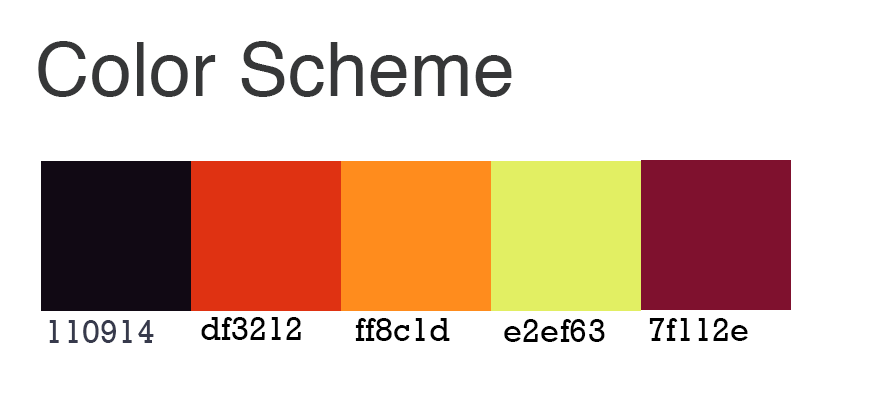
<style>
.page{position:relative;width:870px;height:403px;background:#ffffff}
.page>*{position:absolute;margin:0}
.t1{font:75px "Helvetica";letter-spacing:0.005em;color:#363738}
.t2{font:33.3px "Rockwell";letter-spacing:0.005em;color:#000000}
.t3{font:33.3px "Rockwell";letter-spacing:0.005em;color:#373a4c}
</style>
<div class="page">
<p class="t1" style="left:38px;top:41px;width:474px;height:56px">Color Scheme</p>
<p class="t2" style="left:201px;top:317px;width:100px;height:23px">df3212</p>
<p class="t2" style="left:355px;top:318px;width:95px;height:23px">ff8c1d</p>
<p class="t2" style="left:649px;top:318px;width:99px;height:23px">7f112e</p>
<p class="t3" style="left:49px;top:320px;width:105px;height:23px">110914</p>
<p class="t2" style="left:504px;top:319px;width:101px;height:23px">e2ef63</p>
</div>
